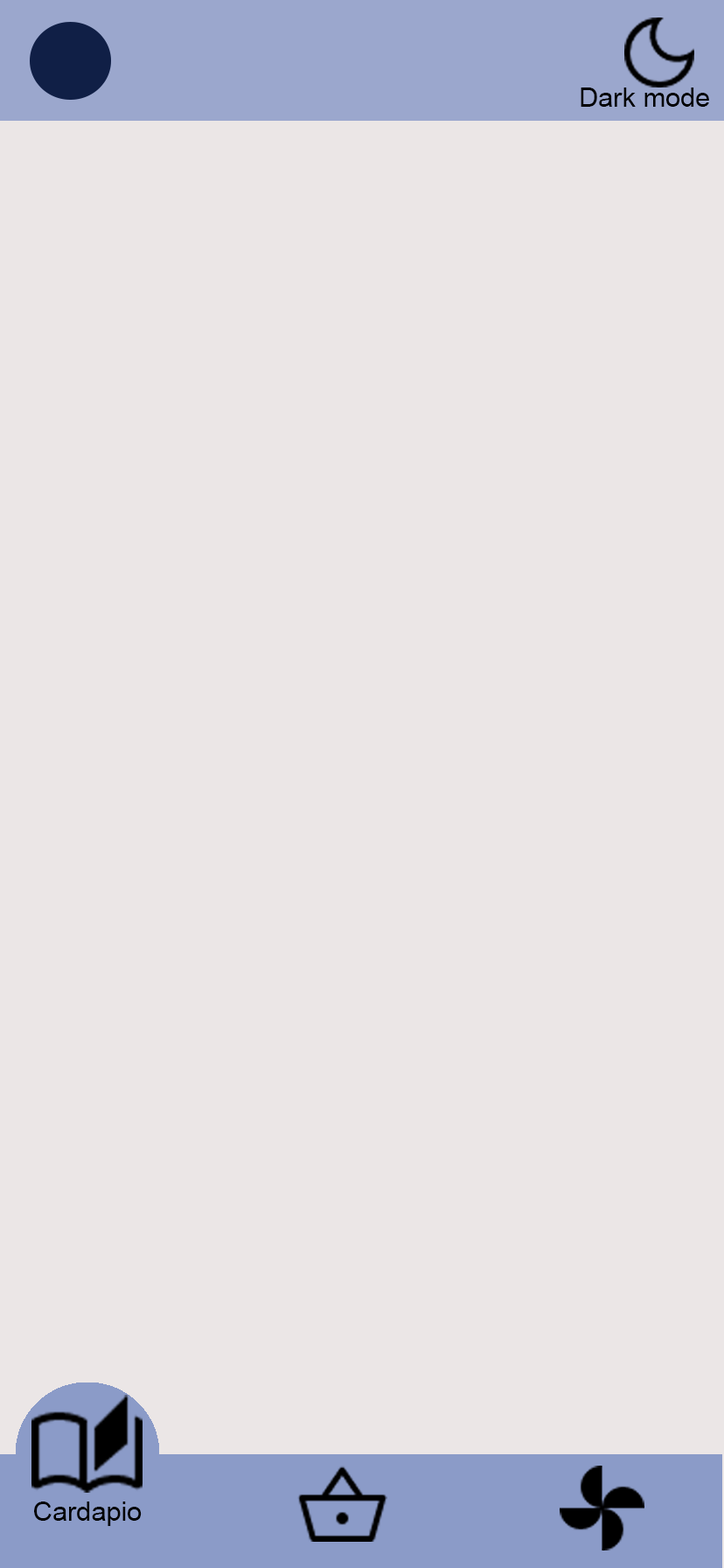
<style>
.page{position:relative;width:724px;height:1568px;background:#ebe6e6}
.page>*{position:absolute;margin:0}
.t1{font:26.9px "ArialMT";color:#000000}
.t2{font:26.9px "ArialMT";color:#010101}
</style>
<div class="page">
<p class="t1" style="left:581px;top:88px;width:129px;height:19px">Dark mode</p>
<p class="t2" style="left:34px;top:1502px;width:108px;height:24px">Cardapio</p>
</div>
